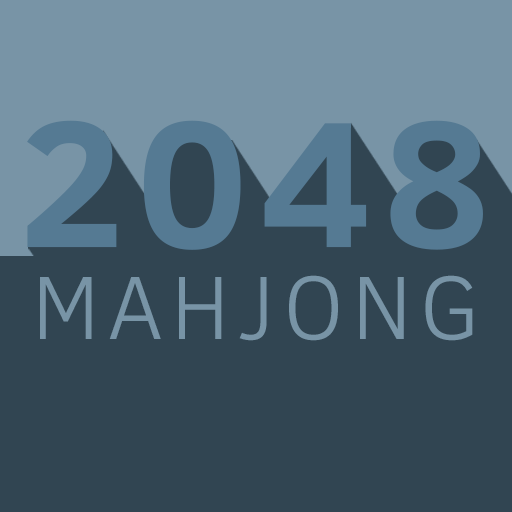
<style>
.page{position:relative;width:512px;height:512px;background:#314552}
.page>*{position:absolute;margin:0}
.t1{font:183.3px "ClearSans-Bold";letter-spacing:0.05em;color:#557a93}
.t2{font:91.6px "ClearSans-Light";letter-spacing:0.075em;color:#7894a6}
</style>
<div class="page">
<p class="t1" style="left:27px;top:120px;width:456px;height:130px">2048</p>
<p class="t2" style="left:40px;top:275px;width:433px;height:66px">MAHJONG</p>
</div>
